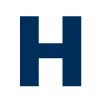
<style>
.page{position:relative;width:100px;height:100px;background:#ffffff}
.page>*{position:absolute;margin:0}
.t1{font:96px "Poppins";letter-spacing:-0.075em;color:#002e5b;font-weight:bold}
</style>
<div class="page">
<p class="t1" style="left:20px;top:16px;width:62px;height:71px">H</p>
</div>
